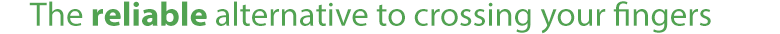
<style>
.page{position:relative;width:780px;height:34px;background:#ffffff}
.page>*{position:absolute;margin:0}
.t1{font:34px "MyriadPro-Regular";color:#51a351}
.t2{font:34px "MyriadPro-Bold";color:#51a351}
</style>
<div class="page">
<p class="t1" style="left:29px;top:1px;width:682px;height:33px">The <span class="t2">reliable </span>alternative to crossing your fingers</p>
</div>
